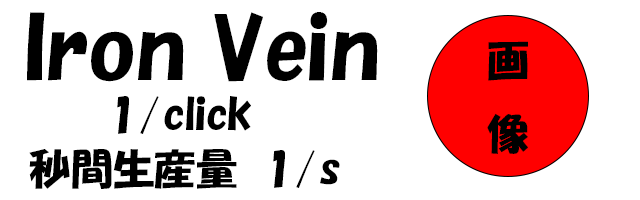
<style>
.page{position:relative;width:640px;height:200px;background:#ffffff}
.page>*{position:absolute;margin:0}
.t1{font:83.3px "HGPSoeiKakupoptai";color:#000000}
.t2{font:41.7px "HGPSoeiKakupoptai";color:#000000}
</style>
<div class="page">
<p class="t1" style="left:27px;top:12px;width:351px;height:70px">Iron Vein</p>
<p class="t2" style="left:487px;top:41px;width:41px;height:113px;text-align:center">画像</p>
<p class="t2" style="left:117px;top:96px;width:134px;height:38px">1/click</p>
<p class="t2" style="left:29px;top:149px;width:311px;height:40px">秒間生産量　1/s</p>
</div>
